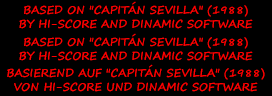
<style>
.page{position:relative;width:272px;height:96px;background:#000000}
.page>*{position:absolute;margin:0}
.t1{font:11px/14px "SegoePrint-Bold";color:#ff0000}
</style>
<div class="page">
<p class="t1" style="left:19px;top:1px;width:234px;height:28px;text-align:center">BASED ON "CAPITÁN SEVILLA" (1988)<br>BY HI-SCORE AND DINAMIC SOFTWARE</p>
<p class="t1" style="left:19px;top:33px;width:234px;height:28px;text-align:center">BASED ON "CAPITÁN SEVILLA" (1988)<br>BY HI-SCORE AND DINAMIC SOFTWARE</p>
<p class="t1" style="left:7px;top:64px;width:258px;height:28px;text-align:center">BASIEREND AUF "CAPITÁN SEVILLA" (1988)<br>VON HI-SCORE UND DINAMIC SOFTWARE</p>
</div>
